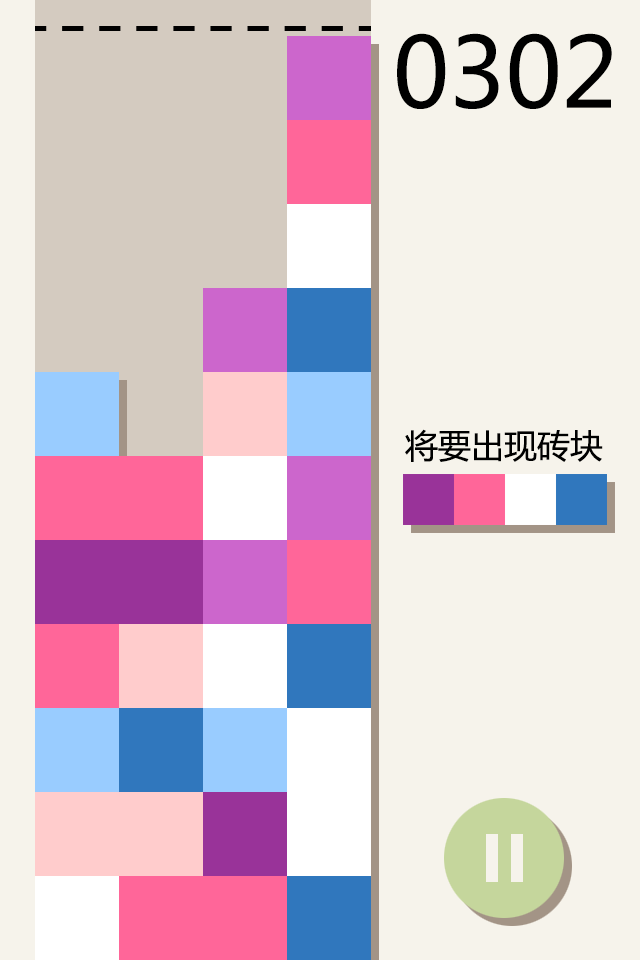
<style>
.page{position:relative;width:640px;height:960px;background:#f6f3eb}
.page>*{position:absolute;margin:0}
.t1{font:96px "MicrosoftYaHei";color:#000000}
.t2{font:33px "MicrosoftYaHei";color:#000000}
</style>
<div class="page">
<p class="t1" style="left:397px;top:33px;width:215px;height:76px">0302</p>
<p class="t2" style="left:405px;top:429px;width:198px;height:33px">将要出现砖块</p>
</div>
